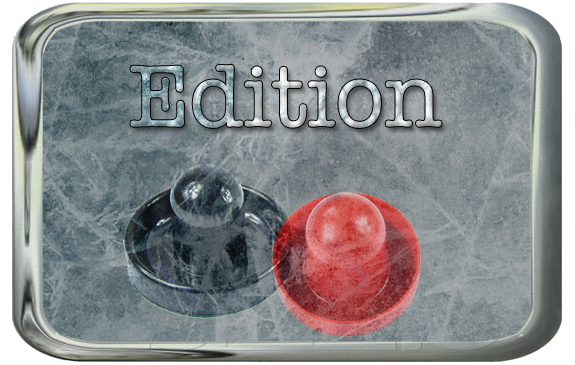
<style>
.page{position:relative;width:575px;height:365px}
.page>*{position:absolute;margin:0}
.t1{font:90px "AmericanTypewriter"}
</style>
<div class="page">
<p class="t1" style="left:130px;top:65px;width:312px;height:63px">Edition</p>
</div>
